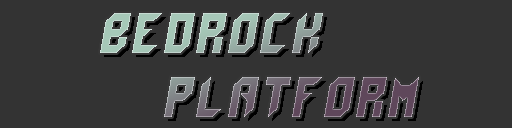
<style>
.page{position:relative;width:512px;height:128px;background:#333333}
.page>*{position:absolute;margin:0}
.t1{font:64px/64px "hailtotem_next";font-style:italic}
</style>
<div class="page">
<p class="t1" style="left:100px;top:13px;width:319px;height:104px">BEDROCK<br>  PLATFORM</p>
</div>
